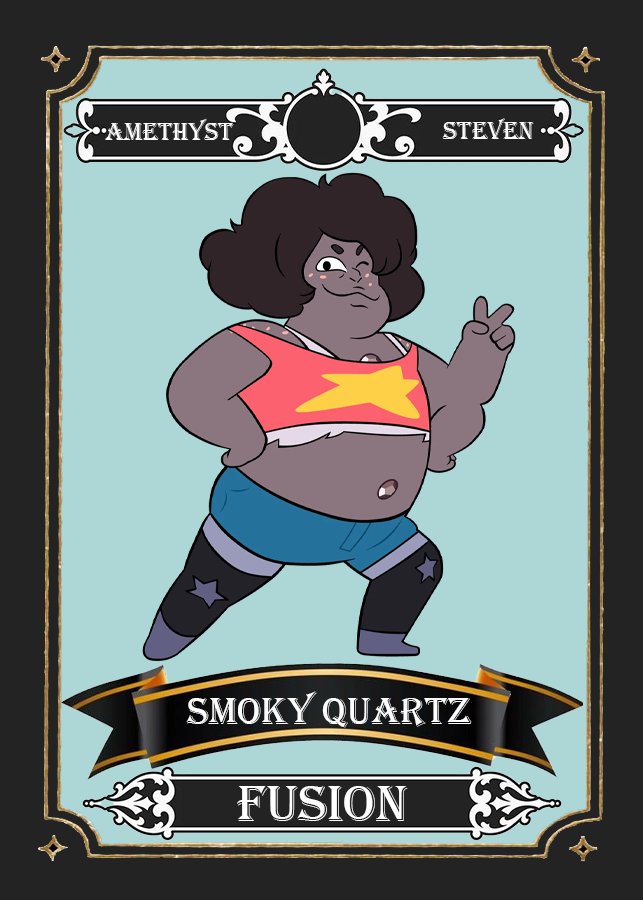
<style>
.page{position:relative;width:643px;height:900px;background:#add7d6}
.page>*{position:absolute;margin:0}
.t1{font:25.2px "Algerian";color:#ffffff}
.t2{font:38.9px "Algerian";color:#ffffff}
.t3{font:52.6px "Algerian";color:#ffffff}
</style>
<div class="page">
<p class="t1" style="left:105px;top:118px;width:129px;height:22px">amethyst</p>
<p class="t1" style="left:442px;top:118px;width:92px;height:21px">steven</p>
<p class="t2" style="left:186px;top:691px;width:286px;height:37px">smoky quartz</p>
<p class="t3" style="left:237px;top:786px;width:171px;height:35px">Fusion</p>
</div>
